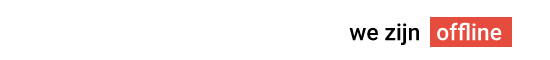
<style>
.page{position:relative;width:550px;height:60px;background:#ffffff}
.page>*{position:absolute;margin:0}
.t1{font:23px "Roboto-Medium";color:#000000}
.t2{font:23px "Roboto-Medium";color:#ffffff}
</style>
<div class="page">
<p class="t1" style="left:349px;top:23px;width:71px;height:23px">we zijn</p>
<p class="t2" style="left:408px;top:22px;width:94px;height:19px"><span class="t1">is  </span>offline</p>
</div>
